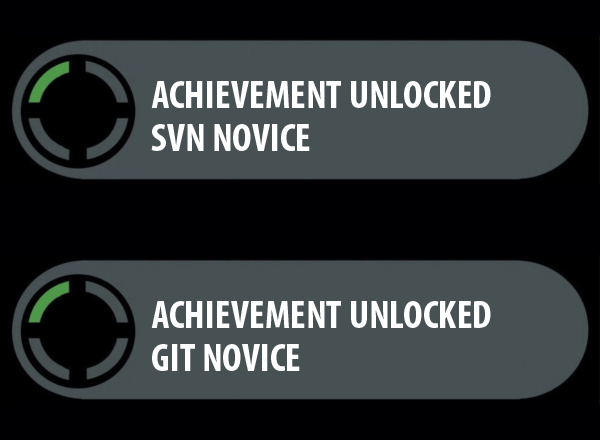
<style>
.page{position:relative;width:600px;height:440px;background:#475153}
.page>*{position:absolute;margin:0}
.t1{font:40px "MyriadPro-BoldCond";color:#ffffff}
</style>
<div class="page">
<p class="t1" style="left:151px;top:81px;width:340px;height:27px">ACHIEVEMENT UNLOCKED</p>
<p class="t1" style="left:151px;top:124px;width:159px;height:27px">SVN NOVICE</p>
<p class="t1" style="left:151px;top:301px;width:340px;height:27px">ACHIEVEMENT UNLOCKED</p>
<p class="t1" style="left:152px;top:344px;width:148px;height:27px">GIT NOVICE</p>
</div>
